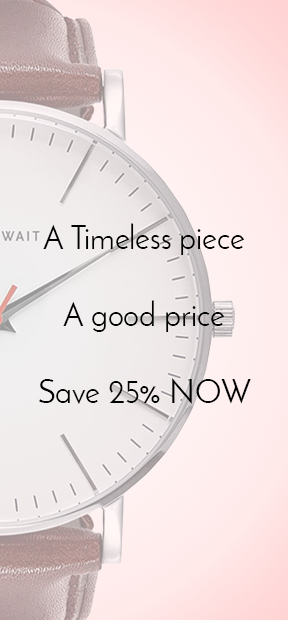
<style>
.page{position:relative;width:288px;height:620px}
.page>*{position:absolute;margin:0}
.t1{font:32px "JosefinSans";color:#000000}
</style>
<div class="page">
<p class="t1" style="left:39px;top:223px;width:212px;height:181px;text-align:center">A Timeless piece<br><br>A good price<br><br>Save 25% NOW</p>
</div>
